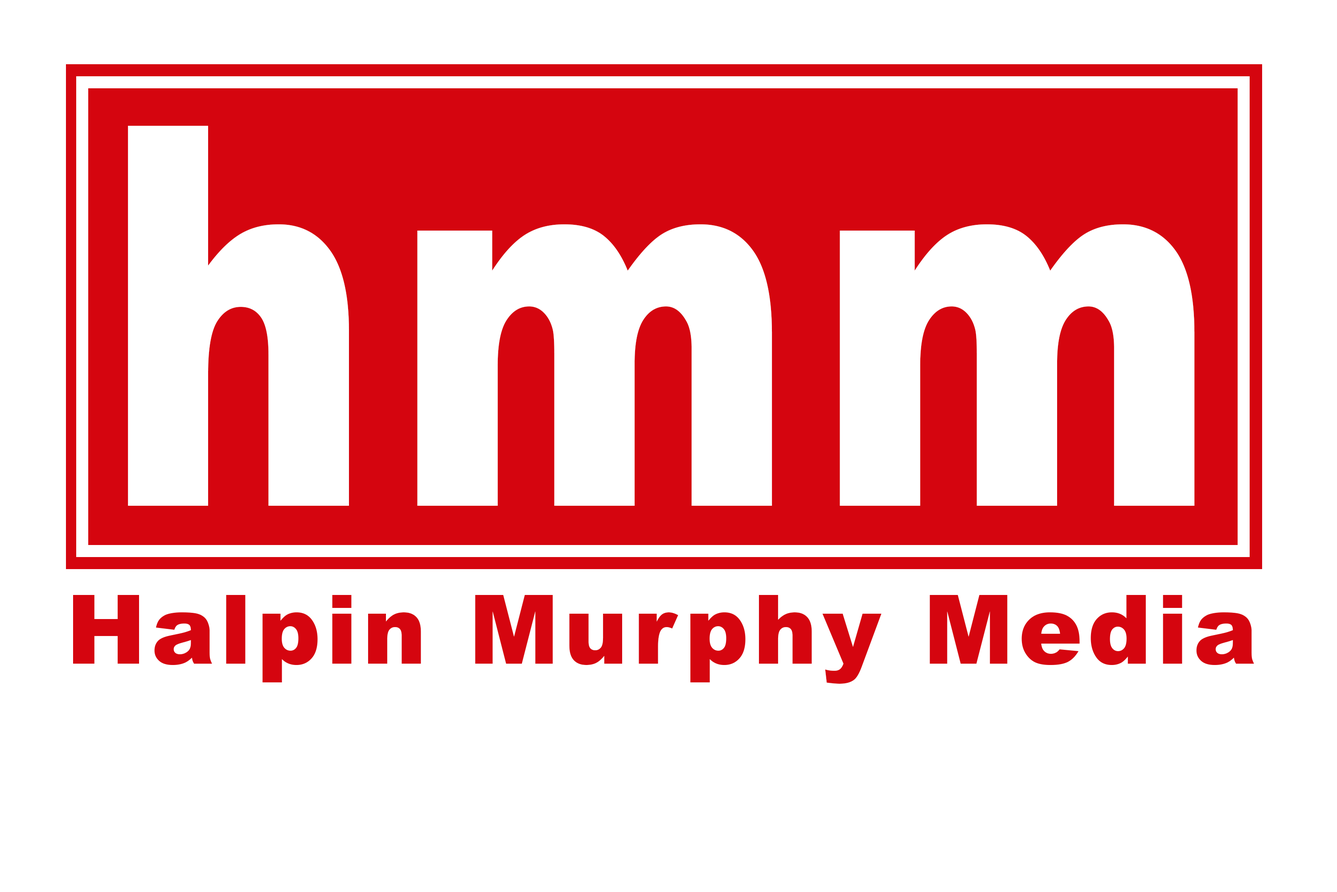
<style>
.page{position:relative;width:1337px;height:892px;background:#ffffff}
.page>*{position:absolute;margin:0}
.t1{font:530.3px "Arial-Black";letter-spacing:0.05em;color:#ffffff;scale:0.76 1}
.t2{font:95.8px "Arial-Black";letter-spacing:0.05em;color:#d5050f}
</style>
<div class="page">
<p class="t1" style="left:128px;top:126px;width:1067px;height:380px">hmm</p>
<p class="t2" style="left:73px;top:595px;width:1181px;height:88px">Halpin Murphy Media</p>
</div>
